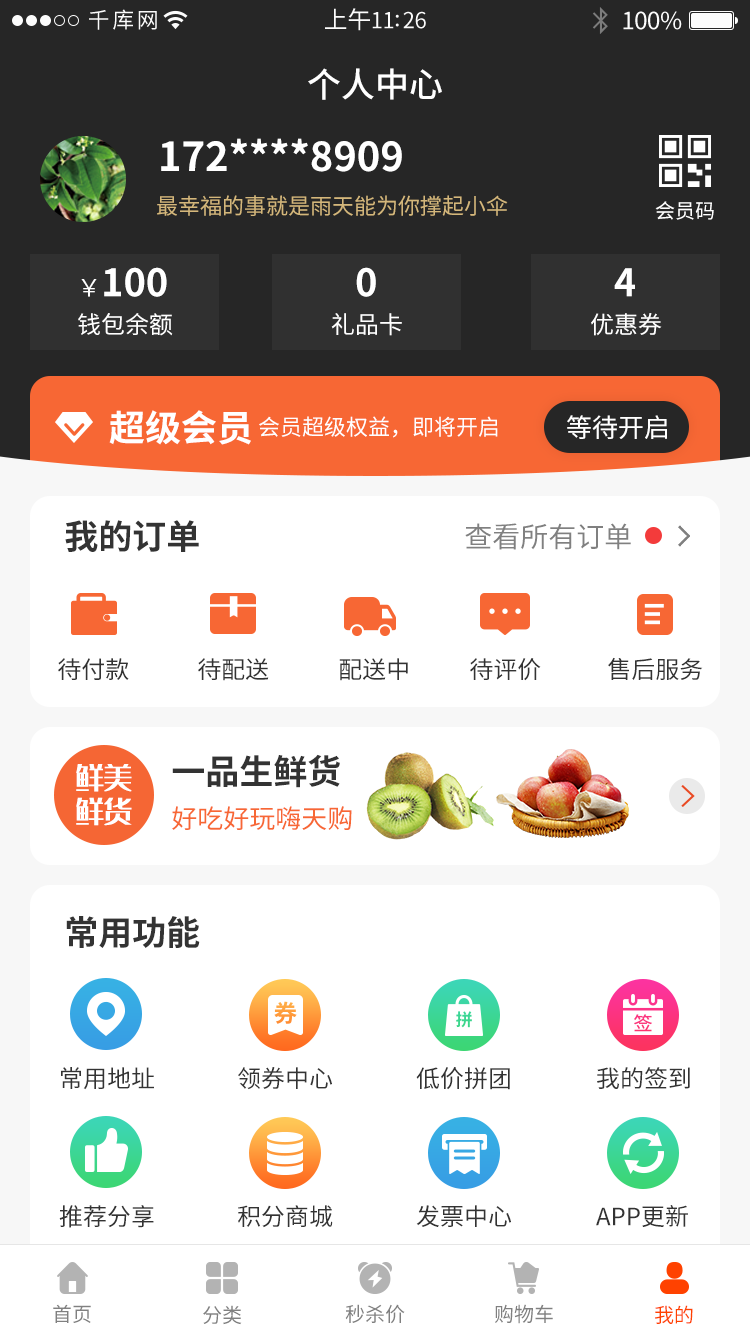
<style>
.page{position:relative;width:750px;height:1334px;background:#ffffff}
.page>*{position:absolute;margin:0}
.t1{font:22px "SourceHanSansCN-Regular";letter-spacing:0.12em;color:#ffffff}
.t2{font:22px "SourceHanSansCN-Regular";letter-spacing:-0.02em;color:#ffffff}
.t3{font:24px "SourceHanSansCN-Regular";letter-spacing:-0.02em;color:#ffffff}
.t4{font:34px "SourceHanSansCN-Medium";color:#ffffff}
.t5{font:40px "SourceHanSansCN-Bold";color:#ffffff}
.t6{font:22px "SourceHanSansCN-Regular";color:#d4b77b}
.t7{font:20px "SourceHanSansCN-Regular";color:#ffffff}
.t8{font:38px "SourceHanSansCN-Bold";color:#ffffff}
.t9{font:24px "SourceHanSansCN-Normal";color:#ffffff}
.t10{font:24px "SourceHanSansCN-Regular";color:#ffffff}
.t11{font:36px "SourceHanSansCN-Bold";color:#ffffff}
.t12{font:22px "SourceHanSansCN-Regular";color:#ffffff}
.t13{font:26px "SourceHanSansCN-Regular";color:#ffffff}
.t14{font:34px "SourceHanSansCN-Bold";color:#333333}
.t15{font:28px "SourceHanSansCN-Regular";color:#808080}
.t16{font:24px "SourceHanSansCN-Regular";color:#333333}
.t17{font:28px "35--Regular";color:#ffffff}
.t18{font:26px "SourceHanSansCN-Regular";color:#f76734}
.t19{font:20px "SourceHanSansCN-Regular";color:#808080}
.t20{font:20px "SourceHanSansCN-Regular";color:#ff4200}
</style>
<div class="page">
<p class="t1" style="left:89px;top:9px;width:68px;height:21px">千库网</p>
<p class="t2" style="left:325px;top:8px;width:101px;height:23px"><span class="t3">上午</span>11:26</p>
<p class="t3" style="left:623px;top:11px;width:59px;height:19px">100%</p>
<p class="t4" style="left:308px;top:68px;width:134px;height:32px">个人中心</p>
<p class="t5" style="left:161px;top:138px;width:241px;height:34px">172****8909</p>
<p class="t6" style="left:157px;top:195px;width:351px;height:21px">最幸福的事就是雨天能为你撑起小伞</p>
<p class="t7" style="left:655px;top:201px;width:59px;height:19px">会员码</p>
<p class="t8" style="left:81px;top:267px;width:86px;height:30px"><span class="t9">￥</span>100</p>
<p class="t8" style="left:356px;top:267px;width:20px;height:30px">0</p>
<p class="t8" style="left:614px;top:268px;width:21px;height:29px">4</p>
<p class="t10" style="left:78px;top:313px;width:95px;height:23px">钱包余额</p>
<p class="t10" style="left:331px;top:313px;width:71px;height:23px">礼品卡</p>
<p class="t10" style="left:591px;top:313px;width:71px;height:23px">优惠券</p>
<p class="t11" style="left:109px;top:410px;width:142px;height:35px">超级会员</p>
<p class="t12" style="left:259px;top:416px;width:239px;height:22px">会员超级权益，即将开启</p>
<p class="t13" style="left:567px;top:415px;width:100px;height:24px">等待开启</p>
<p class="t14" style="left:65px;top:520px;width:134px;height:32px">我的订单</p>
<p class="t15" style="left:465px;top:523px;width:166px;height:27px">查看所有订单</p>
<p class="t16" style="left:58px;top:658px;width:71px;height:22px">待付款</p>
<p class="t16" style="left:198px;top:658px;width:71px;height:23px">待配送</p>
<p class="t16" style="left:339px;top:658px;width:69px;height:23px">配送中</p>
<p class="t16" style="left:470px;top:658px;width:71px;height:23px">待评价</p>
<p class="t16" style="left:608px;top:657px;width:95px;height:23px">售后服务</p>
<p class="t14" style="left:172px;top:754px;width:168px;height:34px">一品生鲜货</p>
<p class="t17" style="left:76px;top:764px;width:56px;height:62px">鲜美<br>鲜货</p>
<p class="t18" style="left:172px;top:806px;width:180px;height:24px">好吃好玩嗨天购</p>
<p class="t14" style="left:66px;top:916px;width:134px;height:32px">常用功能</p>
<p class="t16" style="left:61px;top:1067px;width:93px;height:23px">常用地址</p>
<p class="t16" style="left:238px;top:1067px;width:94px;height:23px">领券中心</p>
<p class="t16" style="left:416px;top:1067px;width:94px;height:23px">低价拼团</p>
<p class="t16" style="left:597px;top:1067px;width:93px;height:22px">我的签到</p>
<p class="t16" style="left:59px;top:1205px;width:95px;height:23px">推荐分享</p>
<p class="t16" style="left:238px;top:1205px;width:95px;height:23px">积分商城</p>
<p class="t16" style="left:416px;top:1205px;width:95px;height:22px">发票中心</p>
<p class="t16" style="left:596px;top:1205px;width:92px;height:22px">APP更新</p>
<p class="t19" style="left:53px;top:1304px;width:38px;height:19px">首页</p>
<p class="t19" style="left:203px;top:1305px;width:39px;height:20px">分类</p>
<p class="t19" style="left:345px;top:1304px;width:60px;height:20px">秒杀价</p>
<p class="t19" style="left:495px;top:1304px;width:58px;height:20px">购物车</p>
<p class="t20" style="left:655px;top:1305px;width:38px;height:19px">我的</p>
</div>
